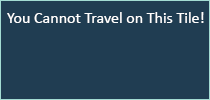
<style>
.page{position:relative;width:210px;height:100px;background:#203d52}
.page>*{position:absolute;margin:0}
.t1{font:16px "Calibri";color:#ffffff}
</style>
<div class="page">
<p class="t1" style="left:7px;top:12px;width:197px;height:11px">You Cannot Travel on This Tile!</p>
</div>
